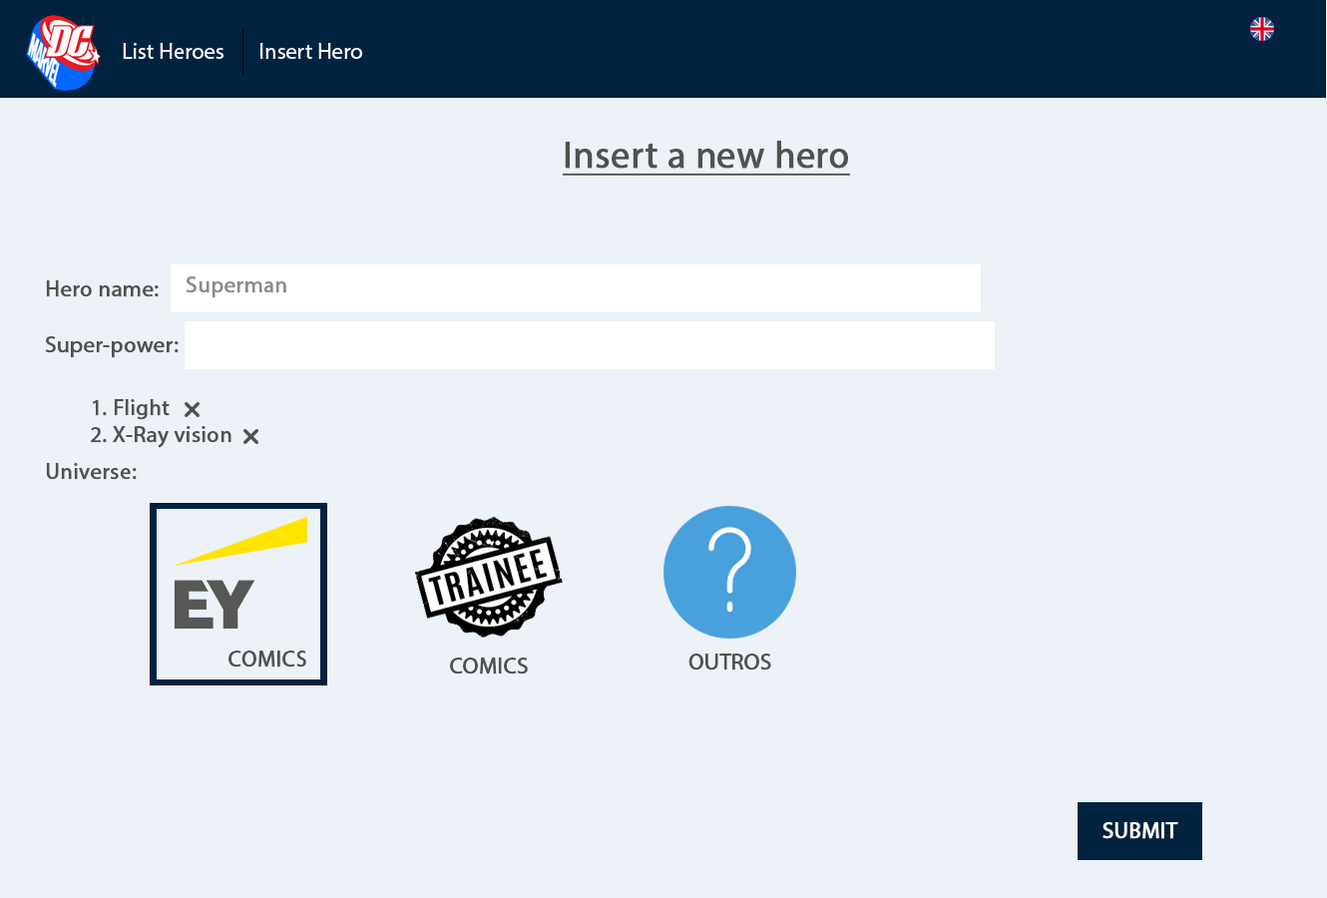
<style>
.page{position:relative;width:1327px;height:898px;background:#ecf2f7}
.page>*{position:absolute;margin:0}
.t1{font:22.5px "MyriadPro-Regular";color:#ffffff}
.t2{font:37.4px "MyriadPro-Regular";color:#515151;font-weight:bold;text-decoration:underline}
.t3{font:22.5px "MyriadPro-Regular";color:#515151;font-weight:bold}
.t4{font:22.5px "MyriadPro-Regular";color:#8b8b8b;font-weight:bold}
.t5{font:22.4px "MyriadPro-Regular";color:#515151;font-weight:bold}
.t6{font:22.5px "MyriadPro-Regular";color:#ffffff;font-weight:bold}
</style>
<div class="page">
<p class="t1" style="left:123px;top:43px;width:101px;height:16px">List Heroes</p>
<p class="t1" style="left:261px;top:43px;width:101px;height:16px">Insert Hero</p>
<p class="t2" style="left:563px;top:141px;width:287px;height:35px">Insert a new hero</p>
<p class="t3" style="left:46px;top:280px;width:113px;height:17px">Hero name:</p>
<p class="t4" style="left:186px;top:276px;width:100px;height:22px">Superman</p>
<p class="t3" style="left:45px;top:336px;width:134px;height:22px">Super-power:</p>
<p class="t3" style="left:91px;top:399px;width:141px;height:49px">1. Flight<br>2. X-Ray vision</p>
<p class="t5" style="left:46px;top:463px;width:91px;height:17px">Universe:</p>
<p class="t5" style="left:229px;top:651px;width:77px;height:17px">COMICS</p>
<p class="t5" style="left:689px;top:654px;width:83px;height:17px">OUTROS</p>
<p class="t5" style="left:450px;top:658px;width:78px;height:17px">COMICS</p>
<p class="t6" style="left:1103px;top:822px;width:76px;height:17px">SUBMIT</p>
</div>
